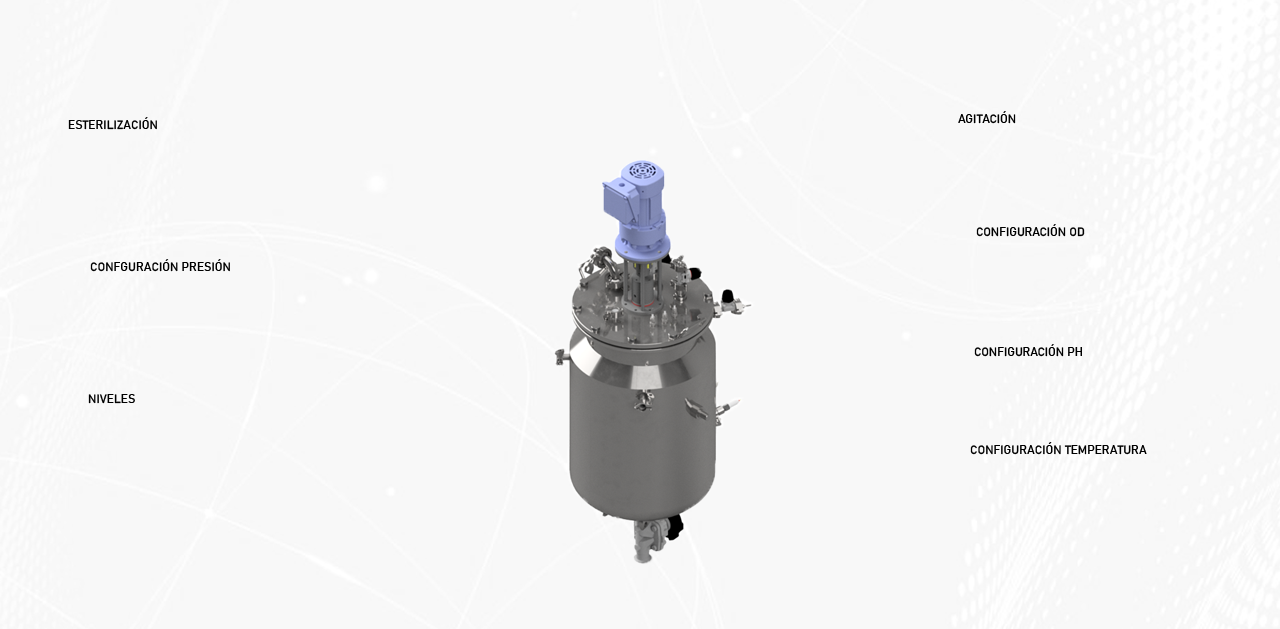
<style>
.page{position:relative;width:1280px;height:629px;background:#f8f8f8}
.page>*{position:absolute;margin:0}
.t1{font:12px "Bahnschrift";color:#000000}
</style>
<div class="page">
<p class="t1" style="left:958px;top:111px;width:58px;height:13px">AGITACIÓN</p>
<p class="t1" style="left:68px;top:117px;width:89px;height:13px">ESTERILIZACIÓN</p>
<p class="t1" style="left:976px;top:224px;width:109px;height:13px">CONFIGURACIÓN OD</p>
<p class="t1" style="left:90px;top:259px;width:140px;height:13px">CONFGURACIÓN PRESIÓN</p>
<p class="t1" style="left:974px;top:344px;width:108px;height:13px">CONFIGURACIÓN PH</p>
<p class="t1" style="left:88px;top:394px;width:47px;height:10px">NIVELES</p>
<p class="t1" style="left:970px;top:442px;width:177px;height:13px">CONFIGURACIÓN TEMPERATURA</p>
</div>
